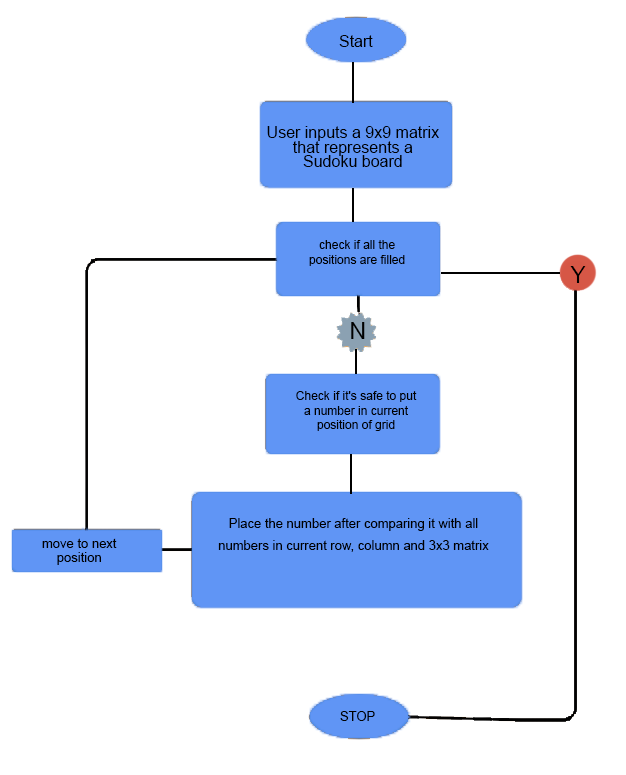
<style>
.page{position:relative;width:626px;height:775px;background:#ffffff}
.page>*{position:absolute;margin:0}
.t1{font:16px "ArialMT";color:#000000}
.t2{font:16px/14.7px "ArialMT";color:#000000}
.t3{font:12px/14.7px "ArialMT";color:#000000}
.t4{font:23px "ArialMT";color:#000000}
.t5{font:13px/21.6px "ArialMT";color:#000000}
.t6{font:13px/14.7px "ArialMT";color:#000000}
.t7{font:13px "ArialMT";color:#000000}
</style>
<div class="page">
<p class="t1" style="left:339px;top:35px;width:34px;height:12px">Start</p>
<p class="t2" style="left:267px;top:126px;width:172px;height:41px;text-align:center">User inputs a 9x9 matrix<br>that represents a<br>Sudoku board</p>
<p class="t3" style="left:309px;top:240px;width:96px;height:26px;text-align:center">check if all the<br>positions are filled</p>
<p class="t4" style="left:570px;top:266px;width:16px;height:17px">Y</p>
<p class="t4" style="left:351px;top:322px;width:14px;height:17px">N</p>
<p class="t3" style="left:296px;top:391px;width:121px;height:40px;text-align:center">Check if it's safe to put<br>a number in current<br>position of grid</p>
<p class="t5" style="left:218px;top:518px;width:271px;height:34px;text-align:center">Place the number after comparing it with all<br>numbers in current row, column and 3x3 matrix</p>
<p class="t6" style="left:42px;top:538px;width:75px;height:27px;text-align:center">move to next<br>position</p>
<p class="t7" style="left:340px;top:711px;width:35px;height:10px">STOP</p>
</div>
